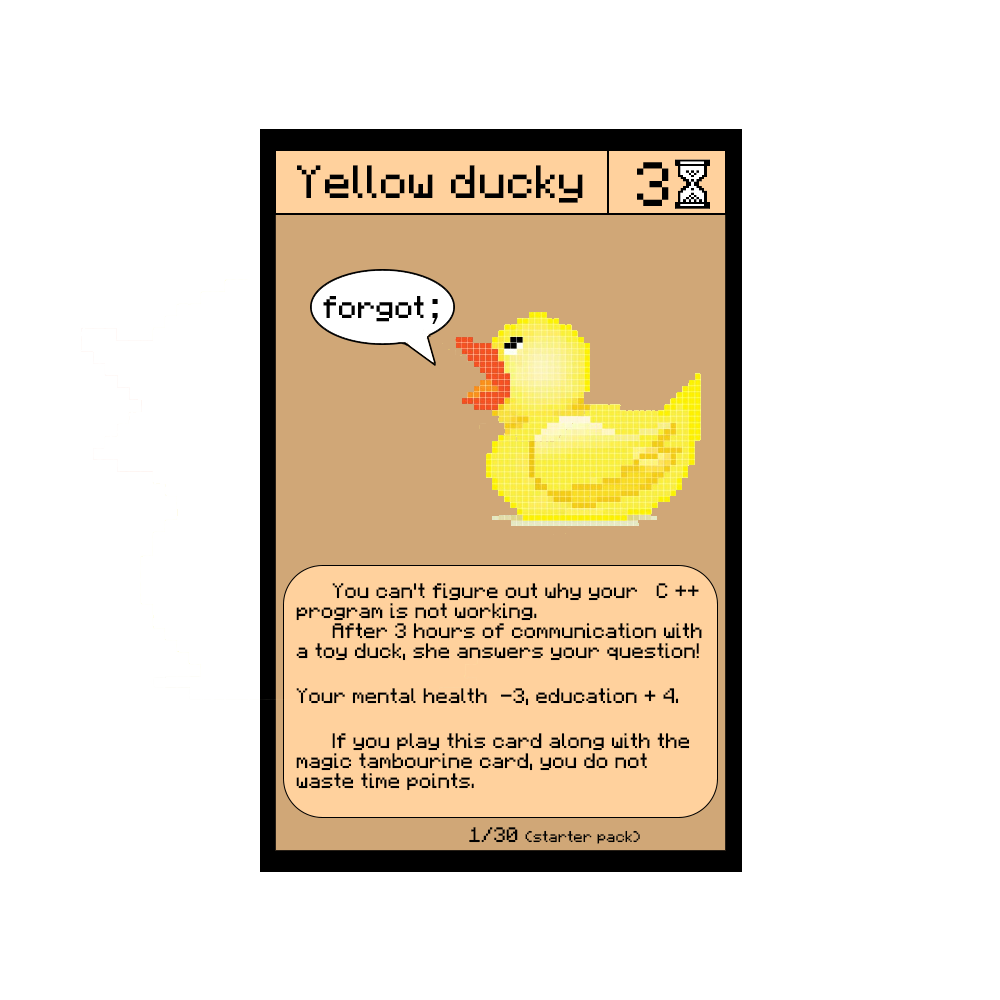
<style>
.page{position:relative;width:1000px;height:1000px;background:#ffffff}
.page>*{position:absolute;margin:0}
.t1{font:37.5px "F77-Minecraft";color:#000000}
.t2{font:16.7px "F77-Minecraft";color:#000000}
.t3{font:16.7px/25px "F77-Minecraft";color:#000000}
.t4{font:12.5px "F77-Minecraft";color:#000000}
</style>
<div class="page">
<p class="t1" style="left:297px;top:165px;width:286px;height:38px">Yellow ducky</p>
<p class="t2" style="left:296px;top:583px;width:406px;height:208px">You can't figure out why your C ++ program is not working. <br> After 3 hours of communication with a toy duck, she answers your question! <br><br><span class="t3">Your mental health  -3, education + 4. <br> <br> If you play this card along with the </span>magic tambourine card, you do not waste time points.</p>
<p class="t4" style="left:469px;top:827px;width:171px;height:17px"><span class="t2">1/30 </span>(starter pack)</p>
</div>
